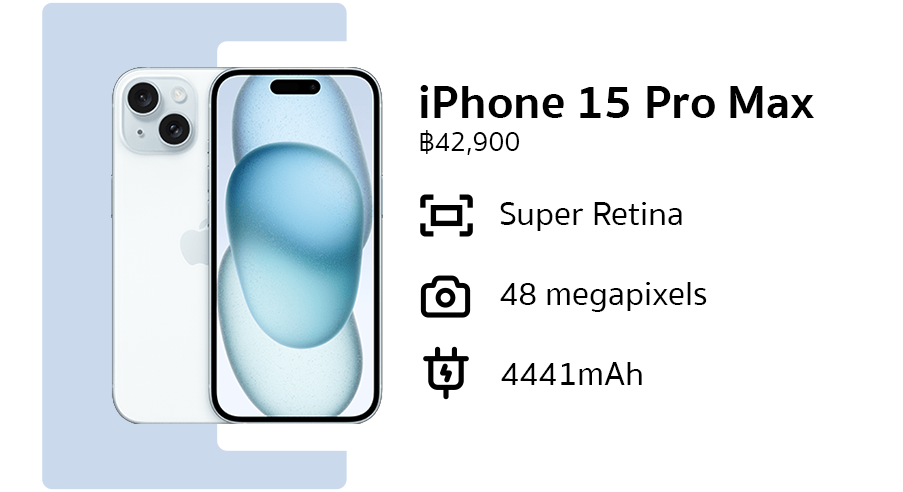
<style>
.page{position:relative;width:903px;height:492px;background:#ffffff}
.page>*{position:absolute;margin:0}
.t1{font:48px "SukhumvitSet-Bold";color:#000000}
.t2{font:28.1px "SukhumvitSet-Text";color:#000000}
.t3{font:33.7px "SukhumvitSet-Medium";color:#000000}
</style>
<div class="page">
<p class="t1" style="left:420px;top:85px;width:394px;height:70px">iPhone 15 Pro Max<br><span class="t2">฿42,900</span></p>
<p class="t3" style="left:500px;top:202px;width:182px;height:29px">Super Retina</p>
<p class="t3" style="left:500px;top:282px;width:207px;height:30px">48 megapixels</p>
<p class="t3" style="left:501px;top:362px;width:141px;height:23px">4441mAh</p>
</div>
